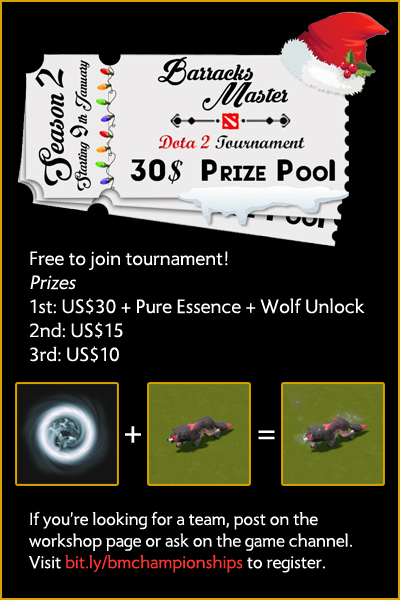
<style>
.page{position:relative;width:400px;height:600px;background:#000000}
.page>*{position:absolute;margin:0}
.t1{font:20px "Radiance";color:#feffff}
.t2{font:20px "Radiance";color:#feffff;font-style:italic}
.t3{font:36px "Radiance";color:#feffff}
.t4{font:18px "Radiance";color:#feffff}
.t5{font:18px "Radiance";color:#ff3232}
</style>
<div class="page">
<p class="t1" style="left:30px;top:251px;width:335px;height:112px">Free to join tournament!<br><span class="t2">Prizes<br></span>1st: US$30 + Pure Essence + Wolf Unlock<br>2nd: US$15<br>3rd: US$10</p>
<p class="t3" style="left:125px;top:426px;width:16px;height:17px">+</p>
<p class="t3" style="left:258px;top:430px;width:17px;height:10px">=</p>
<p class="t4" style="left:29px;top:511px;width:323px;height:62px">If you’re looking for a team, post on the <br>workshop page or ask on the game channel.<br>Visit <span class="t5">bit.ly/bmchampionships</span> to register.</p>
</div>
